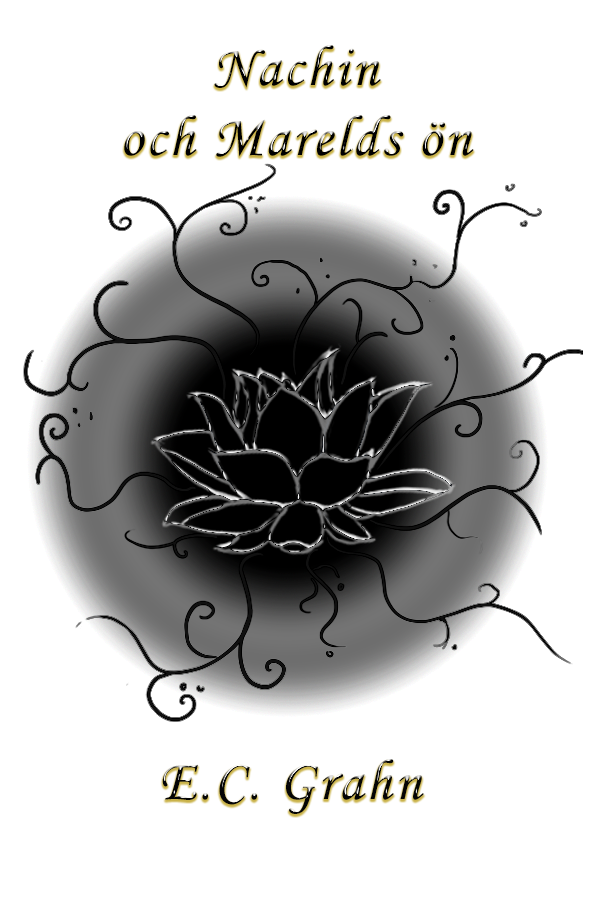
<style>
.page{position:relative;width:600px;height:900px;background:#ffffff}
.page>*{position:absolute;margin:0}
.t1{font:58.3px "MonotypeCorsiva";letter-spacing:0.05em;color:#000000}
</style>
<div class="page">
<p class="t1" style="left:124px;top:45px;width:350px;height:112px;text-align:center">Nachin<br>och Marelds ön</p>
<p class="t1" style="left:162px;top:759px;width:262px;height:55px">E.C. Grahn</p>
</div>
